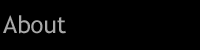
<style>
.page{position:relative;width:200px;height:50px;background:#000000}
.page>*{position:absolute;margin:0}
.t1{font:24px "TrebuchetMS";color:#a9a9a9}
</style>
<div class="page">
<p class="t1" style="left:3px;top:15px;width:63px;height:19px">About</p>
</div>
